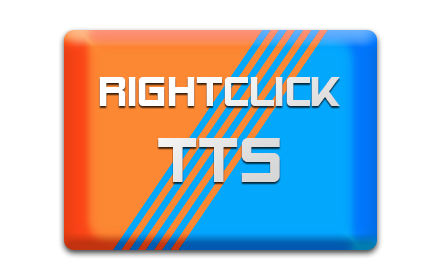
<style>
.page{position:relative;width:440px;height:280px;background:#ffffff}
.page>*{position:absolute;margin:0}
.t1{font:42.3px "SFAlienEncountersSolid";color:#ebebeb}
.t2{font:63.4px "SFAlienEncountersSolid";color:#ebebeb}
</style>
<div class="page">
<p class="t1" style="left:99px;top:77px;width:241px;height:105px;text-align:center">RightClick<br><span class="t2">TTS</span></p>
</div>
